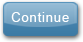
<style>
.page{position:relative;width:83px;height:42px}
.page>*{position:absolute;margin:0}
.t1{font:13.4px "ArialMT";letter-spacing:0.05em;color:#ffffff}
</style>
<div class="page">
<p class="t1" style="left:11px;top:12px;width:58px;height:10px">Continue</p>
</div>
